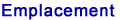
<style>
.page{position:relative;width:120px;height:20px;background:#ffffff}
.page>*{position:absolute;margin:0}
.t1{font:16.7px "ArialMT";letter-spacing:0.04em;color:#000099;font-weight:bold}
</style>
<div class="page">
<p class="t1" style="left:2px;top:4px;width:113px;height:16px">Emplacement</p>
</div>
